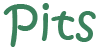
<style>
.page{position:relative;width:99px;height:50px;background:#ffffff}
.page>*{position:absolute;margin:0}
.t1{font:48px "KristenITC-Regular";color:#3b815c}
</style>
<div class="page">
<p class="t1" style="left:3px;top:3px;width:93px;height:44px">Pits</p>
</div>
